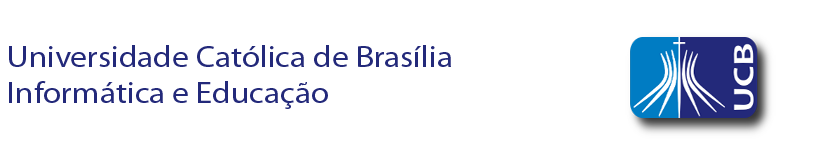
<style>
.page{position:relative;width:833px;height:151px;background:#ffffff}
.page>*{position:absolute;margin:0}
.t1{font:30px "MyriadPro-Regular";color:#23297a;scale:1.11 1}
</style>
<div class="page">
<p class="t1" style="left:9px;top:45px;width:442px;height:64px">Universidade Católica de Brasília<br>Informática e Educação</p>
</div>
